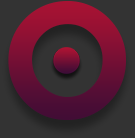
<style>
.page{position:relative;width:135px;height:138px;background:#333333}
.page>*{position:absolute;margin:0}
.t1{font:160.8px "AvantGardeITCbyBT-Demi";letter-spacing:0.04em}
</style>
<div class="page">
<p class="t1" style="left:8px;top:1px;width:118px;height:119px">O</p>
</div>
